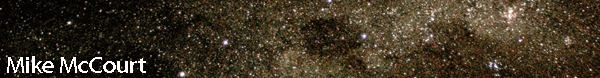
<style>
.page{position:relative;width:600px;height:78px}
.page>*{position:absolute;margin:0}
.t1{font:24px "MyriadPro-Regular";color:#ffffff}
</style>
<div class="page">
<p class="t1" style="left:7px;top:56px;width:139px;height:17px">Mike McCourt</p>
</div>
